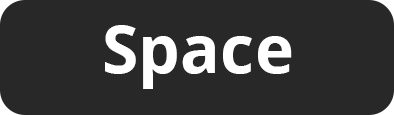
<style>
.page{position:relative;width:394px;height:115px;background:#282828}
.page>*{position:absolute;margin:0}
.t1{font:66.3px "NotoSans-Bold";color:#ffffff}
</style>
<div class="page">
<p class="t1" style="left:105px;top:25px;width:187px;height:64px">Space</p>
</div>
